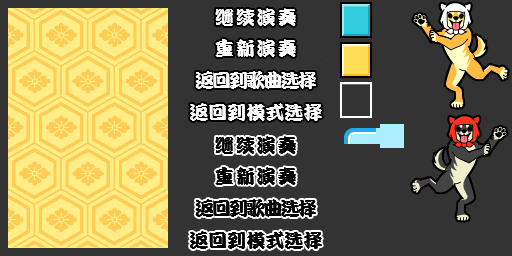
<style>
.page{position:relative;width:512px;height:256px;background:#333333}
.page>*{position:absolute;margin:0}
.t1{font:19px "DFPKanTingLiuW9";letter-spacing:0.1em;color:#ffffff}
.t2{font:19px "DFPKanTingLiuW9";letter-spacing:-0.1em;color:#ffffff}
.t3{font:19px "DFPKanTingLiuW9";color:#ffffff}
.t4{font:19px "DFPKanTingLiuW9";letter-spacing:0.1em;color:#000000}
.t5{font:19px "DFPKanTingLiuW9";letter-spacing:-0.1em;color:#000000}
.t6{font:19px "DFPKanTingLiuW9";color:#000000}
</style>
<div class="page">
<p class="t1" style="left:215px;top:8px;width:81px;height:18px">继续演奏</p>
<p class="t1" style="left:215px;top:39px;width:81px;height:18px">重新演奏</p>
<p class="t2" style="left:195px;top:71px;width:121px;height:18px">返回到歌曲选择</p>
<p class="t3" style="left:190px;top:103px;width:132px;height:18px">返回到模式选择</p>
<p class="t4" style="left:215px;top:136px;width:81px;height:18px">继续演奏</p>
<p class="t4" style="left:215px;top:167px;width:81px;height:18px">重新演奏</p>
<p class="t5" style="left:195px;top:199px;width:121px;height:18px">返回到歌曲选择</p>
<p class="t6" style="left:190px;top:231px;width:132px;height:18px">返回到模式选择</p>
</div>
